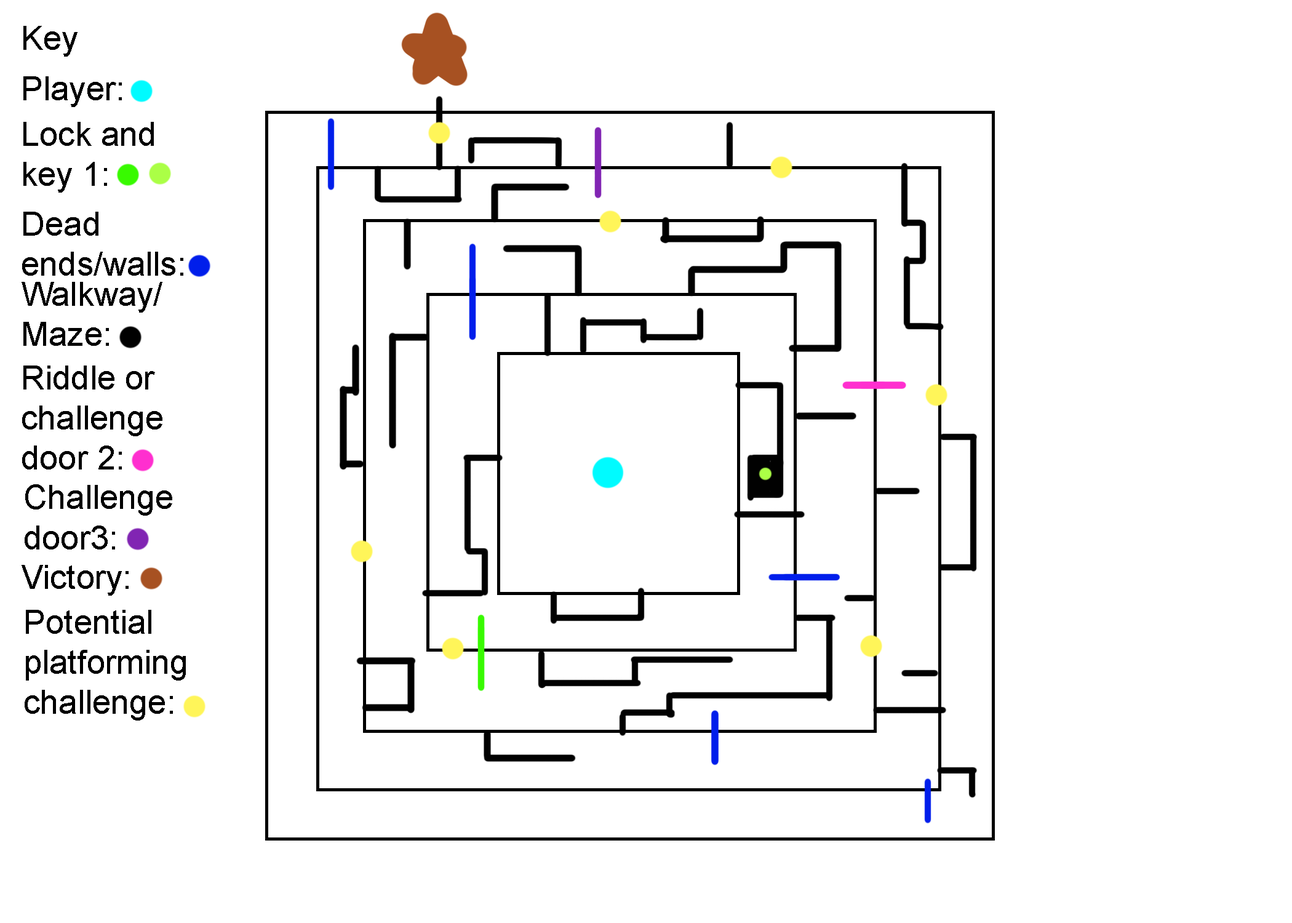
<style>
.page{position:relative;width:1292px;height:923px;background:#ffffff}
.page>*{position:absolute;margin:0}
.t1{font:33.4px "ArialMT";color:#000000}
</style>
<div class="page">
<p class="t1" style="left:23px;top:76px;width:99px;height:31px">Player:</p>
<p class="t1" style="left:23px;top:122px;width:131px;height:71px">Lock and<br>key 1:</p>
<p class="t1" style="left:22px;top:212px;width:161px;height:64px">Dead ends/walls:</p>
<p class="t1" style="left:22px;top:282px;width:140px;height:64px">Walkway/ Maze:</p>
<p class="t1" style="left:22px;top:365px;width:140px;height:104px">Riddle or<br>challenge<br>door 2:</p>
<p class="t1" style="left:25px;top:484px;width:147px;height:65px">Challenge <br>door3:</p>
<p class="t1" style="left:22px;top:565px;width:107px;height:31px">Victory:</p>
<p class="t1" style="left:25px;top:610px;width:161px;height:110px">Potential<br>platforming<br>challenge:</p>
</div>
